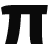
<style>
.page{position:relative;width:48px;height:48px;background:#ffffff}
.page>*{position:absolute;margin:0}
.t1{font:80px "MyriadPro-Bold";color:#0a0a0a}
</style>
<div class="page">
<p class="t1" style="left:1px;top:5px;width:47px;height:39px">π</p>
</div>
